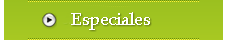
<style>
.page{position:relative;width:227px;height:40px}
.page>*{position:absolute;margin:0}
.t1{font:18px "BookAntiqua";letter-spacing:-0.02em;color:#ffffff}
</style>
<div class="page">
<p class="t1" style="left:71px;top:12px;width:79px;height:18px">Especiales</p>
</div>
